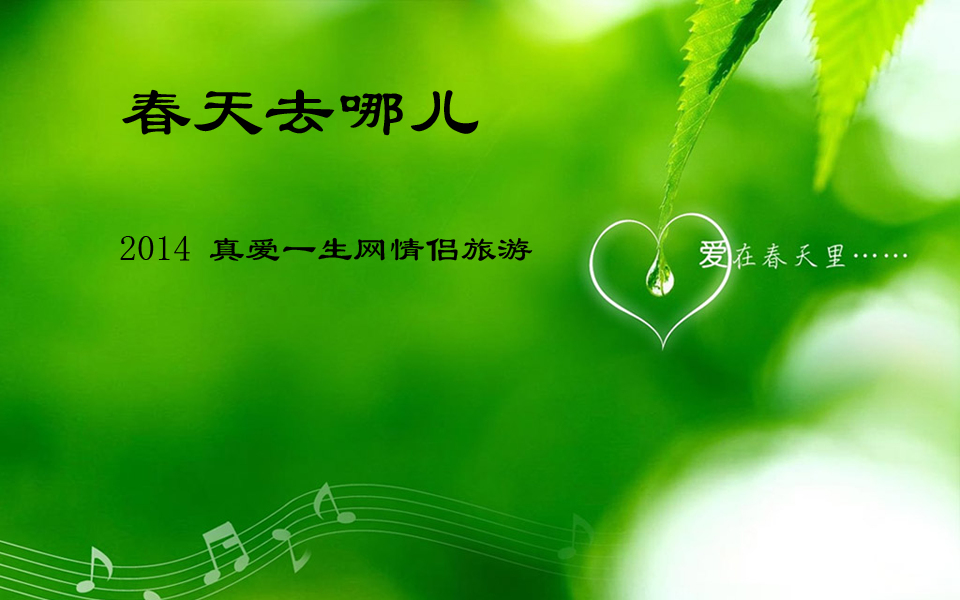
<style>
.page{position:relative;width:960px;height:600px}
.page>*{position:absolute;margin:0}
.t1{font:72px "LiSu";color:#000000}
.t2{font:36px "LiSu";color:#000000}
</style>
<div class="page">
<p class="t1" style="left:122px;top:89px;width:357px;height:47px">春天去哪儿</p>
<p class="t2" style="left:120px;top:235px;width:413px;height:27px">2014 真爱一生网情侣旅游</p>
</div>
